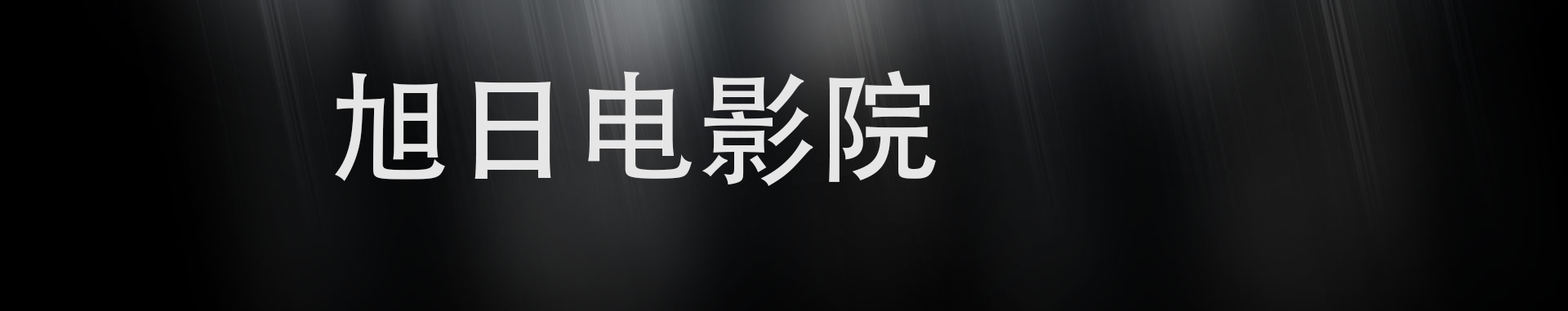
<style>
.page{position:relative;width:1568px;height:311px}
.page>*{position:absolute;margin:0}
.t1{font:122.5px "AdobeHeitiStd-Regular";color:#e6e6e6}
</style>
<div class="page">
<p class="t1" style="left:335px;top:70px;width:601px;height:116px">旭日电影院</p>
</div>
